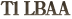
<style>
.page{position:relative;width:72px;height:19px;background:#ffffff}
.page>*{position:absolute;margin:0}
.t1{font:18px "RyuminPro-ExBold";letter-spacing:-0.08em;color:#4a3f32;font-weight:bold;scale:0.9 1}
</style>
<div class="page">
<p class="t1" style="left:0px;top:1px;width:71px;height:15px">T1 LBAA</p>
</div>
